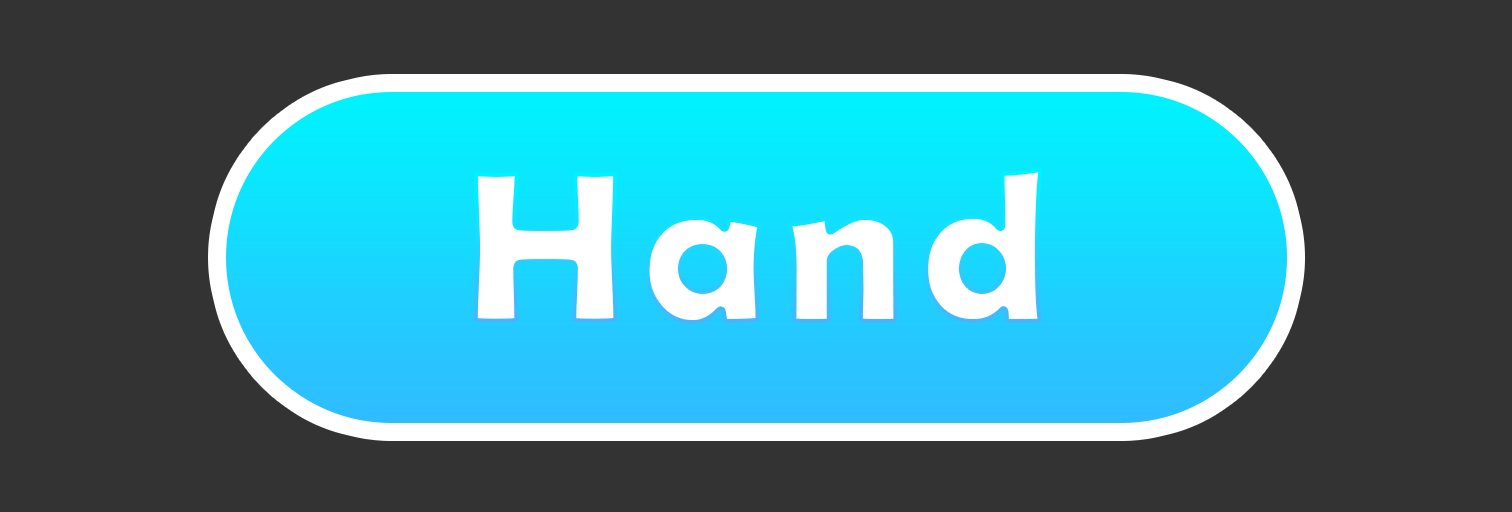
<style>
.page{position:relative;width:1512px;height:512px;background:#333333}
.page>*{position:absolute;margin:0}
.t1{font:218.9px "BerlinSansFBDemi-Bold";letter-spacing:0.06em;color:#ffffff}
</style>
<div class="page">
<p class="t1" style="left:473px;top:168px;width:570px;height:156px">Hand</p>
</div>
